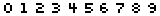
<style>
.page{position:relative;width:160px;height:16px;background:#ffffff}
.page>*{position:absolute;margin:0}
.t1{font:16px "Silkscreen-Regular";color:#000000}
</style>
<div class="page">
<p class="t1" style="left:4px;top:3px;width:8px;height:10px">0</p>
<p class="t1" style="left:21px;top:3px;width:6px;height:10px">1</p>
<p class="t1" style="left:36px;top:3px;width:8px;height:10px">2</p>
<p class="t1" style="left:52px;top:3px;width:8px;height:10px">3</p>
<p class="t1" style="left:69px;top:3px;width:8px;height:10px">4</p>
<p class="t1" style="left:85px;top:3px;width:8px;height:10px">5</p>
<p class="t1" style="left:100px;top:3px;width:8px;height:10px">6</p>
<p class="t1" style="left:116px;top:3px;width:8px;height:10px">7</p>
<p class="t1" style="left:132px;top:3px;width:8px;height:10px">8</p>
<p class="t1" style="left:148px;top:3px;width:8px;height:10px">9</p>
</div>
